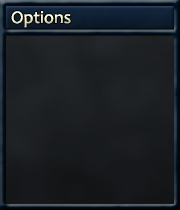
<style>
.page{position:relative;width:180px;height:210px}
.page>*{position:absolute;margin:0}
.t1{font:18px "Candara";color:#fefcdd}
</style>
<div class="page">
<p class="t1" style="left:11px;top:11px;width:60px;height:17px">Options</p>
</div>
